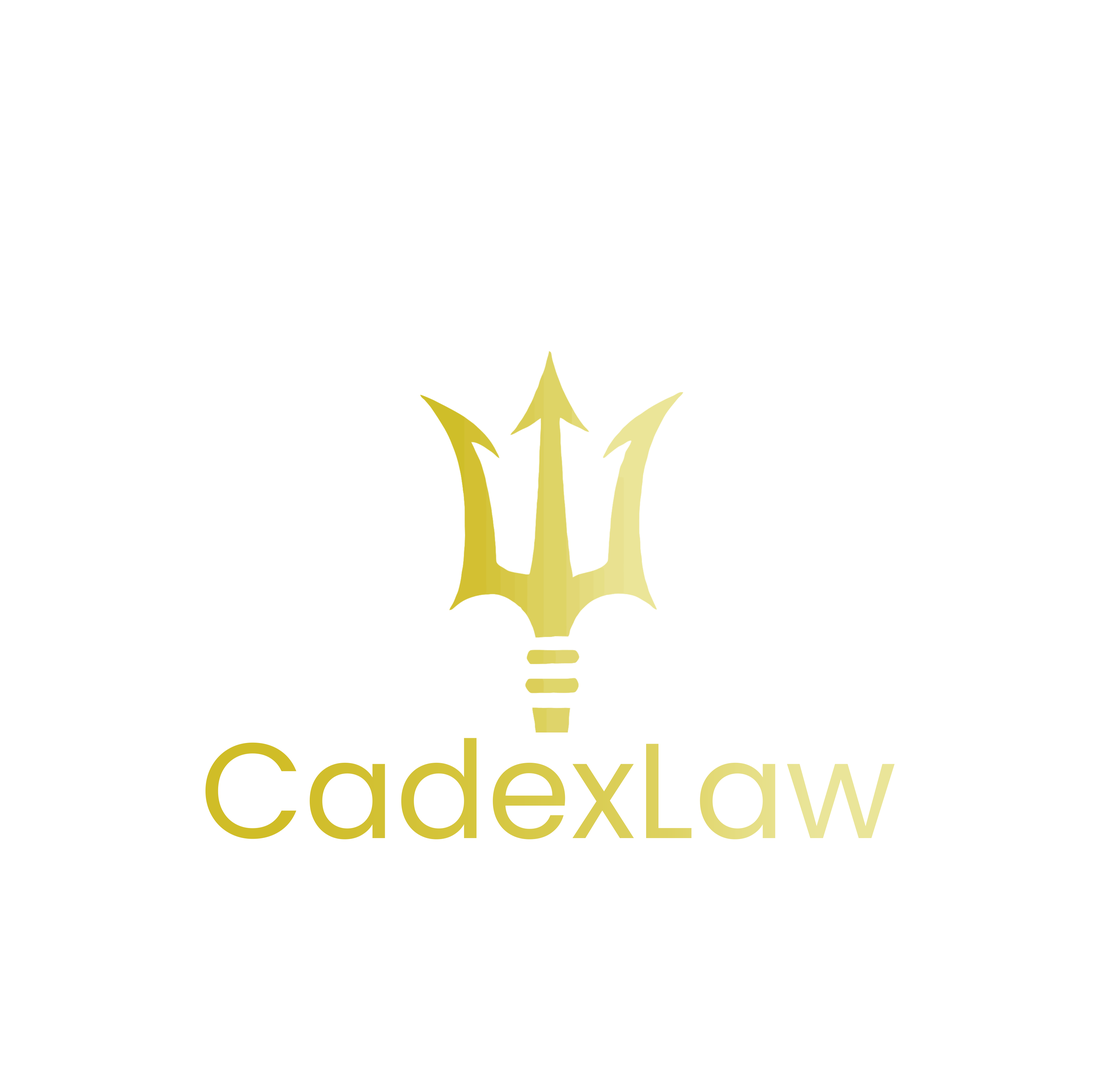
<style>
.page{position:relative;width:1100px;height:1084px;background:#ffffff}
.page>*{position:absolute;margin:0}
.t1{font:135.2px "Poppins-Regular"}
</style>
<div class="page">
<p class="t1" style="left:205px;top:738px;width:690px;height:102px">CadexLaw</p>
</div>
